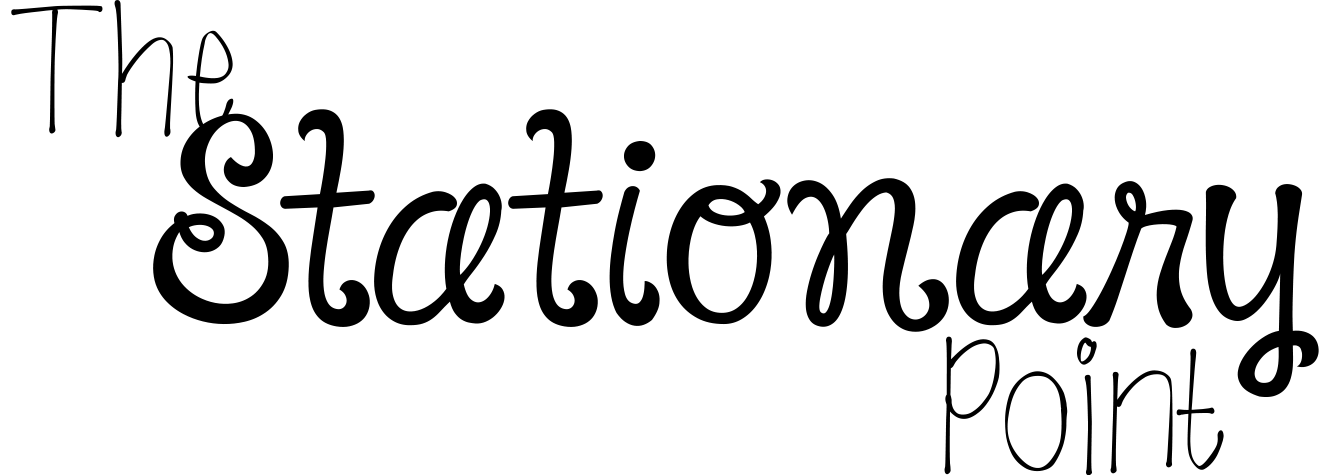
<style>
.page{position:relative;width:1340px;height:475px;background:#ffffff}
.page>*{position:absolute;margin:0}
.t1{font:200px "goingtodogreatthings";color:#000000}
.t2{font:200px "JandaHappyDay";color:#000000}
</style>
<div class="page">
<p class="t1" style="left:11px;top:0px;width:223px;height:138px">The</p>
<p class="t2" style="left:153px;top:109px;width:1166px;height:288px">Stationary</p>
<p class="t1" style="left:944px;top:336px;width:280px;height:140px">Point</p>
</div>
